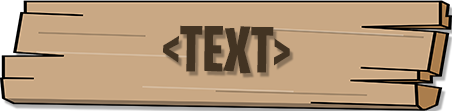
<style>
.page{position:relative;width:452px;height:111px;background:#c9a884}
.page>*{position:absolute;margin:0}
.t1{font:65px "BurbankBigCondensed-Bold";color:#433423}
</style>
<div class="page">
<p class="t1" style="left:163px;top:25px;width:127px;height:49px;rotate:1deg">&lt;TEXT&gt;</p>
</div>
